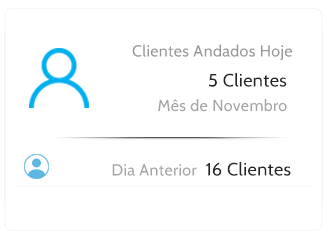
<style>
.page{position:relative;width:328px;height:240px;background:#ffffff}
.page>*{position:absolute;margin:0}
.t1{font:16px "Cabin-Regular";letter-spacing:0.025em;color:#989797}
.t2{font:18px "Cabin-Regular";letter-spacing:0.025em;color:#232523}
.t3{font:16px "Cabin-Regular";letter-spacing:0.025em;color:#a5a4a4}
</style>
<div class="page">
<p class="t1" style="left:132px;top:44px;width:160px;height:17px">Clientes Andados Hoje</p>
<p class="t2" style="left:209px;top:73px;width:78px;height:14px">5 Clientes</p>
<p class="t3" style="left:158px;top:99px;width:129px;height:13px">Mês de Novembro</p>
<p class="t3" style="left:112px;top:162px;width:179px;height:14px">Dia Anterior <span class="t2"> 16 Clientes</span></p>
</div>
